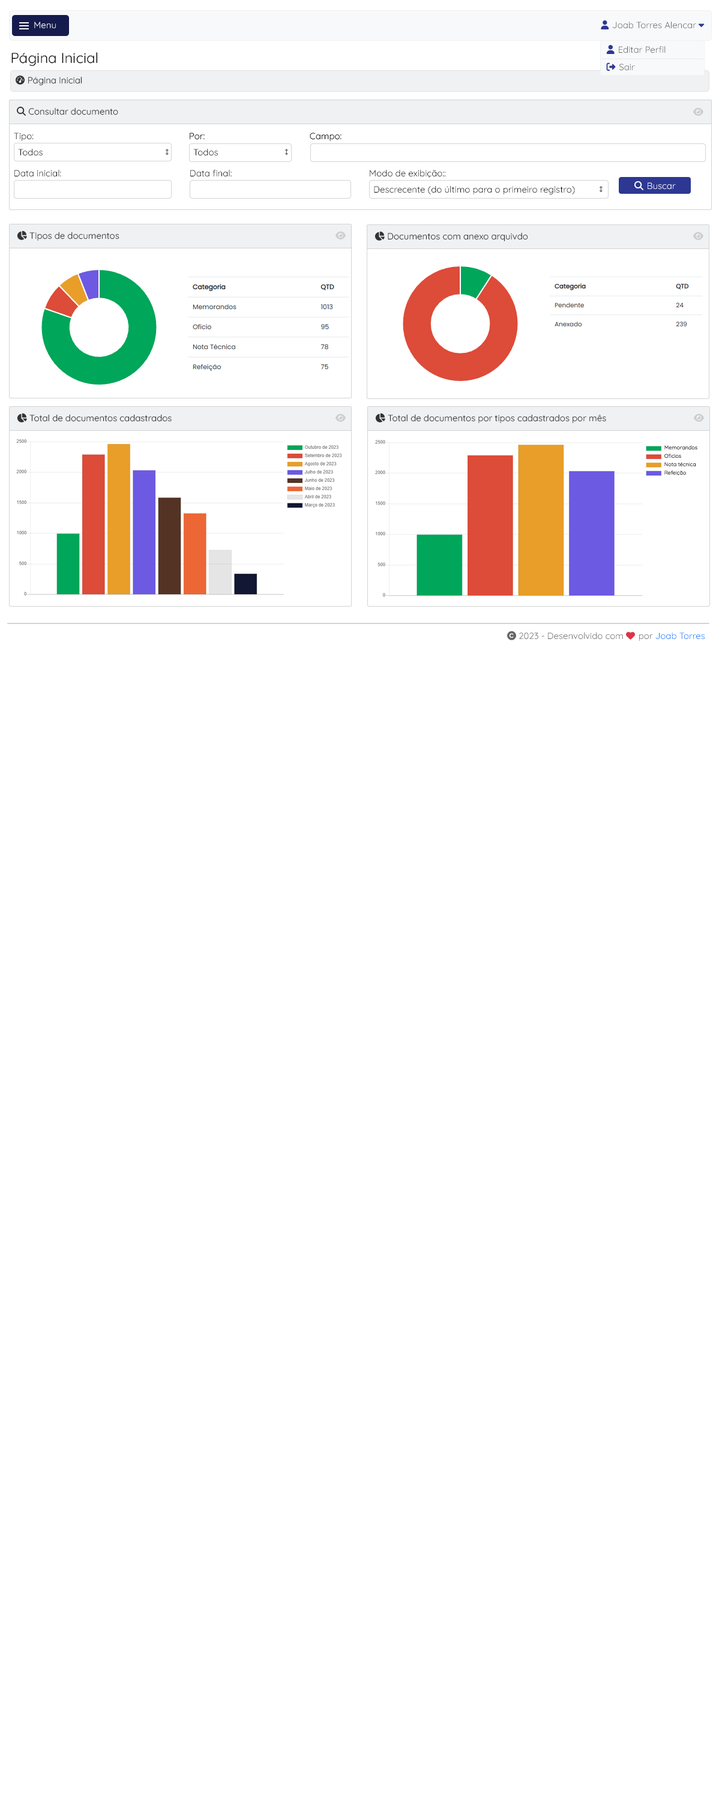
<style>
.page{position:relative;width:719px;height:1800px;background:#ffffff}
.page>*{position:absolute;margin:0}
.t1{font:9px "Quicksand-Regular";color:#ffffff}
.t2{font:9px "Quicksand-Regular";color:#666666}
.t3{font:9px "FontAwesome6Free-Solid";color:#2c3892}
.t4{font:14.4px "Quicksand-Regular";color:#000000}
.t5{font:9px "Quicksand-Regular";color:#333333}
.t6{font:9px "FontAwesome6Free-Solid";color:#333333}
.t7{font:9px "Quicksand-Regular";color:#000000}
.t8{font:5.4px "Quicksand-Regular";color:#000000}
.t9{font:5.4px "Quicksand-Regular"}
.t10{font:5.4px "Quicksand-Regular";color:#232323}
.t11{font:9px "FontAwesome6Free-Solid";color:#666666}
.t12{font:9px "FontAwesome6Free-Solid";color:#dc3545}
.t13{font:9px "Quicksand-Regular";color:#007bff}
</style>
<div class="page">
<p class="t1" style="left:34px;top:22px;width:22px;height:7px">Menu</p>
<p class="t2" style="left:601px;top:20px;width:103px;height:9px"><span class="t3">User </span>Joab Torres Alencar <span class="t3">caret-down</span></p>
<p class="t4" style="left:11px;top:52px;width:87px;height:14px">Página Inicial</p>
<p class="t2" style="left:606px;top:45px;width:59px;height:9px"><span class="t3">user </span>Editar Perfil</p>
<p class="t5" style="left:16px;top:75px;width:66px;height:11px"><span class="t6">gauge-high</span> Página Inicial</p>
<p class="t5" style="left:17px;top:106px;width:101px;height:10px"><span class="t6">magnifying-glass</span> Consultar documento</p>
<p class="t7" style="left:14px;top:133px;width:20px;height:8px">Tipo:</p>
<p class="t7" style="left:190px;top:133px;width:15px;height:7px">Por:</p>
<p class="t7" style="left:310px;top:133px;width:31px;height:9px">Campo:</p>
<p class="t7" style="left:18px;top:149px;width:25px;height:7px">Todos</p>
<p class="t7" style="left:193px;top:149px;width:25px;height:7px">Todos</p>
<p class="t7" style="left:14px;top:170px;width:47px;height:7px">Data inicial:</p>
<p class="t7" style="left:190px;top:170px;width:42px;height:7px">Data final:</p>
<p class="t7" style="left:370px;top:170px;width:75px;height:8px">Modo de exibição::</p>
<p class="t7" style="left:374px;top:186px;width:201px;height:8px">Descrecente (do último para o primeiro registro)</p>
<p class="t5" style="left:17px;top:230px;width:102px;height:11px"><span class="t6">chart-pie</span> Tipos de documentos</p>
<p class="t5" style="left:374px;top:231px;width:154px;height:11px"><span class="t6">chart-pie</span> Documentos com anexo arquivdo</p>
<p class="t5" style="left:17px;top:413px;width:155px;height:9px"><span class="t6">chart-pie</span> Total de documentos cadastrados</p>
<p class="t5" style="left:375px;top:413px;width:231px;height:11px"><span class="t6">chart-pie</span> Total de documentos por tipos cadastrados por mês</p>
<p class="t8" style="left:664px;top:445px;width:33px;height:5px">Memorandos</p>
<p class="t9" style="left:664px;top:454px;width:17px;height:4px">Oficios</p>
<p class="t8" style="left:664px;top:462px;width:32px;height:5px">Nota técnica</p>
<p class="t10" style="left:664px;top:470px;width:22px;height:6px">Refeição</p>
<p class="t2" style="left:507px;top:631px;width:198px;height:10px"><span class="t11">copyright</span> 2023 - Desenvolvido com <span class="t12">heart </span>por <span class="t13">Joab Torres</span></p>
</div>
